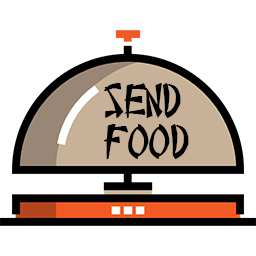
<style>
.page{position:relative;width:256px;height:256px;background:#ffffff}
.page>*{position:absolute;margin:0}
.t1{font:34.4px "ChineseTakeaway";color:#000000}
</style>
<div class="page">
<p class="t1" style="left:104px;top:83px;width:85px;height:76px;text-align:right">Send<br>food</p>
</div>
